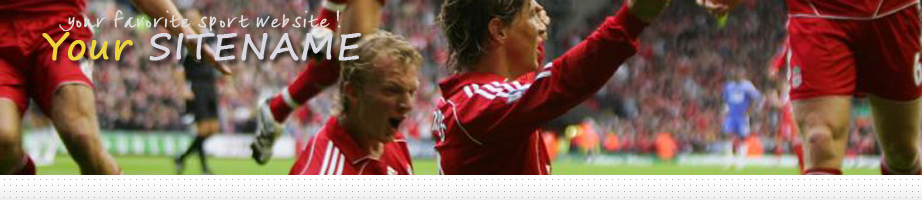
<style>
.page{position:relative;width:922px;height:200px}
.page>*{position:absolute;margin:0}
.t1{font:19px "lizzielongstocking";letter-spacing:0.025em;color:#e0e0df;font-weight:bold}
.t2{font:36px "SegoePrint";letter-spacing:0.025em;color:#dad9e2;font-weight:bold}
.t3{font:36px "SegoePrint";letter-spacing:0.025em;color:#edd43b;font-weight:bold}
</style>
<div class="page">
<p class="t1" style="left:59px;top:10px;width:282px;height:22px">your favorite sport website !</p>
<p class="t2" style="left:42px;top:32px;width:319px;height:29px"><span class="t3">Your </span>SITENAME</p>
</div>
